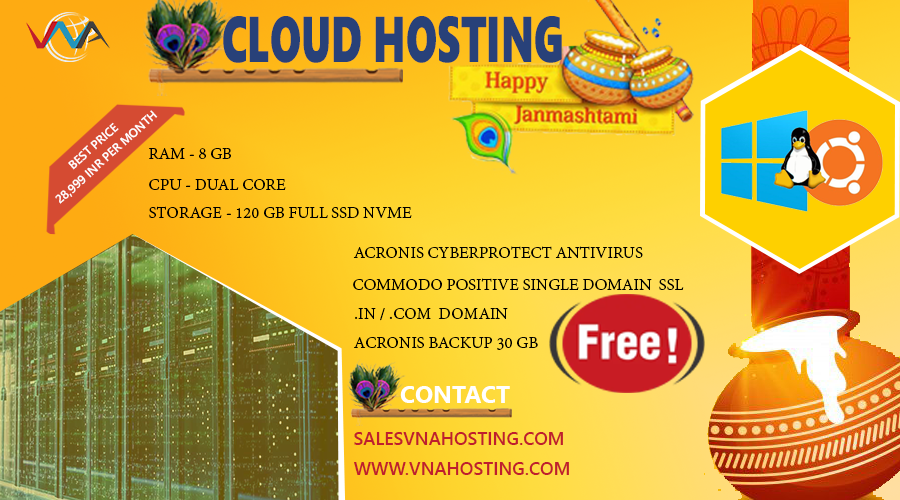
<style>
.page{position:relative;width:900px;height:500px}
.page>*{position:absolute;margin:0}
.t1{font:64.7px "SegoeUIBlack";color:#284179;scale:0.63 1}
.t2{font:12px "SegoeUI-Semibold";color:#ffffff}
.t3{font:18px "AdobeDevanagari-Regular";color:#000000}
.t4{font:24px "SegoeUI-Bold";color:#ffffff}
.t5{font:18px "SegoeUI-Semibold";color:#bf1e2e}
</style>
<div class="page">
<p class="t1" style="left:223px;top:16px;width:339px;height:47px">CLOUD HOSTING</p>
<p class="t2" style="left:55px;top:110px;width:103px;height:94px;rotate:-42deg">28,999 INR PER MONTH</p>
<p class="t2" style="left:68px;top:122px;width:51px;height:48px;rotate:-42deg">BEST PRICE</p>
<p class="t3" style="left:149px;top:148px;width:82px;height:11px">RAM - 8 GB</p>
<p class="t3" style="left:149px;top:179px;width:137px;height:11px">CPU - DUAL CORE</p>
<p class="t3" style="left:149px;top:206px;width:263px;height:12px">STORAGE - 120 GB FULL SSD NVME</p>
<p class="t3" style="left:353px;top:246px;width:290px;height:12px">ACRONIS CYBERPROTECT ANTIVIRUS</p>
<p class="t3" style="left:353px;top:278px;width:331px;height:12px">COMMODO POSITIVE SINGLE DOMAIN  SSL</p>
<p class="t3" style="left:355px;top:308px;width:153px;height:13px">.IN / .COM  DOMAIN</p>
<p class="t3" style="left:354px;top:337px;width:184px;height:13px">ACRONIS BACKUP 30 GB</p>
<p class="t4" style="left:400px;top:386px;width:110px;height:17px">CONTACT</p>
<p class="t5" style="left:354px;top:432px;width:209px;height:13px">SALESVNAHOSTING.COM</p>
<p class="t5" style="left:354px;top:462px;width:215px;height:13px">WWW.VNAHOSTING.COM</p>
</div>
